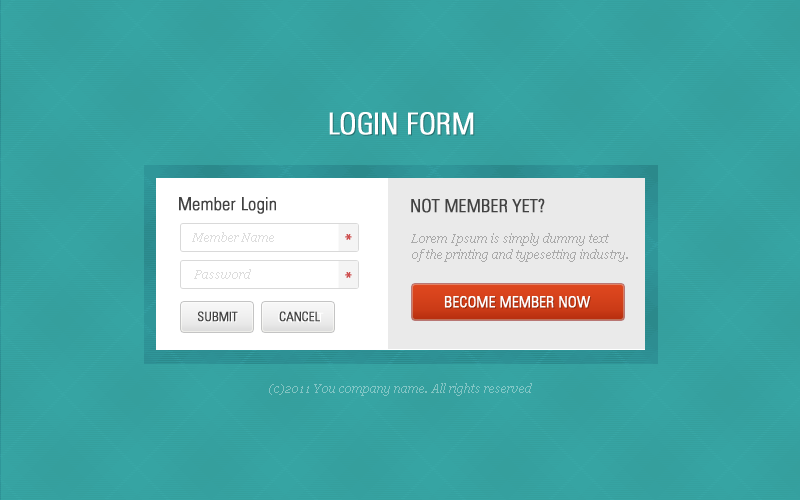
<style>
.page{position:relative;width:800px;height:500px;background:#36a4a3}
.page>*{position:absolute;margin:0}
.t1{font:29.7px "ZurichBT-LightCondensed";color:#ffffff;text-transform:uppercase;font-weight:bold}
.t2{font:18px "ZurichBT-LightCondensed";color:#424242;font-weight:bold}
.t3{font:12px "Georgia-Italic";color:#dddddd}
.t4{font:12px/16px "Georgia-Italic";color:#aaaaaa}
.t5{font:18px "ZurichBT-LightCondensed";color:#cc4848;font-weight:bold}
.t6{font:15.4px "ZurichBT-LightCondensed";color:#fefefe;font-weight:bold}
.t7{font:13px "ZurichBT-LightCondensed";color:#424242;font-weight:bold}
.t8{font:12px "Georgia-Italic";color:#82c5c5}
</style>
<div class="page">
<p class="t1" style="left:329px;top:112px;width:145px;height:23px">Login Form</p>
<p class="t2" style="left:179px;top:197px;width:97px;height:17px">Member Login</p>
<p class="t2" style="left:411px;top:198px;width:134px;height:15px">NOT MEMBER YET?</p>
<p class="t3" style="left:192px;top:232px;width:82px;height:10px">Member Name</p>
<p class="t4" style="left:411px;top:233px;width:217px;height:29px">Lorem Ipsum is simply dummy text <br>of the printing and typesetting industry.</p>
<p class="t5" style="left:345px;top:234px;width:7px;height:6px">*</p>
<p class="t3" style="left:194px;top:269px;width:57px;height:10px">Password</p>
<p class="t5" style="left:345px;top:272px;width:7px;height:6px">*</p>
<p class="t6" style="left:444px;top:296px;width:147px;height:12px">BECOME MEMBER NOW</p>
<p class="t7" style="left:198px;top:311px;width:40px;height:11px">SUBMIT</p>
<p class="t7" style="left:279px;top:311px;width:41px;height:11px">CANCEL</p>
<p class="t8" style="left:269px;top:383px;width:263px;height:13px">(c)2011 You company name. All rights reserved</p>
</div>
